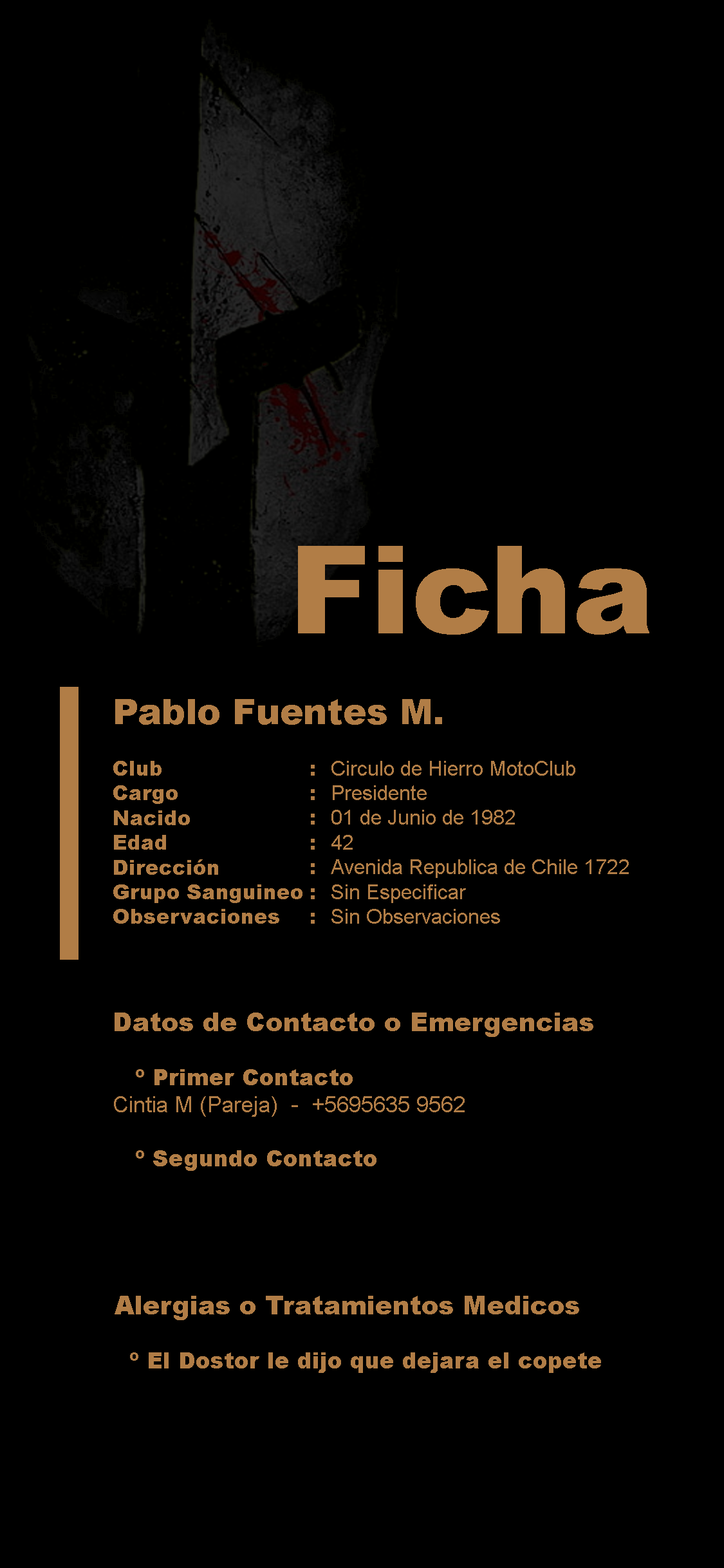
<style>
.page{position:relative;width:724px;height:1568px;background:#000000}
.page>*{position:absolute;margin:0}
.t1{font:122.3px "Arial-Black";color:#b17d46}
.t2{font:20.6px "Arial-Black";color:#b17d46}
.t3{font:35.4px "Arial-Black";color:#b17d46}
.t4{font:22.5px "Arial-Black";color:#b17d46}
.t5{font:20.6px "ArialMT";color:#b17d46}
.t6{font:22.5px "ArialMT";color:#b17d46}
.t7{font:25.7px "Arial-Black";color:#b17d46}
</style>
<div class="page">
<p class="t1" style="left:298px;top:546px;width:351px;height:89px">Ficha</p>
<p class="t2" style="left:113px;top:699px;width:329px;height:225px"><span class="t3">Pablo Fuentes M.<br></span><span class="t4"><br></span>Club<br>Cargo<br>Nacido<br>Edad<br>Dirección<br>Grupo Sanguineo<br>Observaciones</p>
<p class="t5" style="left:331px;top:761px;width:298px;height:163px">Circulo de Hierro MotoClub<br>Presidente<br>01 de Junio de 1982<br>42<br>Avenida Republica de Chile 1722<br>Sin Especificar<br>Sin Observaciones</p>
<p class="t2" style="left:311px;top:765px;width:4px;height:159px">:<br>:<br>:<br>:<br>:<br>:<br>:</p>
<p class="t6" style="left:114px;top:1013px;width:479px;height:158px"><span class="t7">Datos de Contacto o Emergencias<br></span><span class="t4"><br> º Primer Contacto<br></span>Cintia M (Pareja)  -  +5695635 9562<br><span class="t4"><br> º Segundo Contacto</span></p>
<p class="t4" style="left:115px;top:1296px;width:486px;height:77px"><span class="t7">Alergias o Tratamientos Medicos<br></span><br>  º El Dostor le dijo que dejara el copete</p>
</div>
